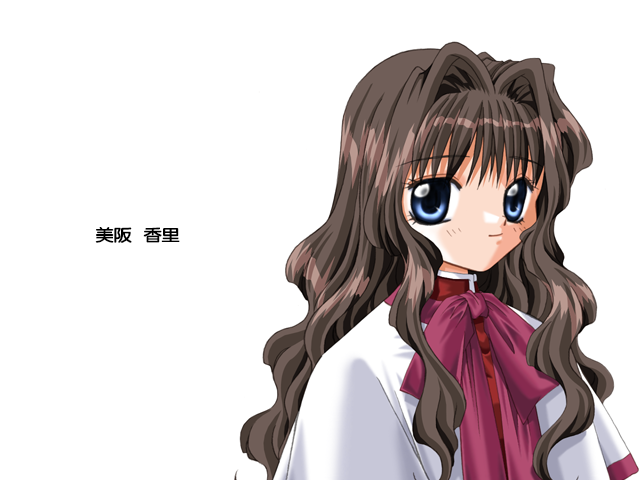
<style>
.page{position:relative;width:640px;height:480px;background:#ffffff}
.page>*{position:absolute;margin:0}
.t1{font:17px "FZY4K--GBK1-0";letter-spacing:-0.08em;color:#000000;scale:1.14 1}
</style>
<div class="page">
<p class="t1" style="left:95px;top:227px;width:85px;height:16px">美阪   香里</p>
</div>
